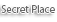
<style>
.page{position:relative;width:57px;height:22px;background:#ffffff}
.page>*{position:absolute;margin:0}
.t1{font:10px "KozGoPr6N-Regular";color:#666666}
</style>
<div class="page">
<p class="t1" style="left:1px;top:5px;width:54px;height:8px">Secret Place</p>
</div>
